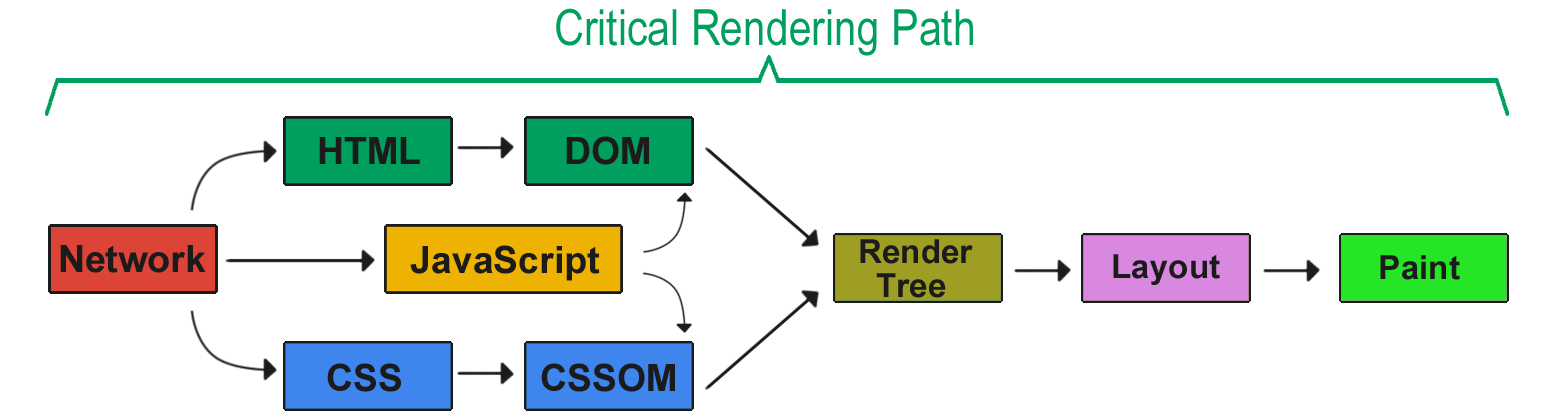
<style>
.page{position:relative;width:1552px;height:417px;background:#ffffff}
.page>*{position:absolute;margin:0}
.t1{font:50px "ArialNarrow";color:#009f5d}
.t2{font:37.5px "Arial-BoldMT";color:#1b1b1b}
.t3{font:33.3px/33.3px "Arial-BoldMT";color:#1b1b1b}
.t4{font:33.3px "Arial-BoldMT";color:#1b1b1b}
</style>
<div class="page">
<p class="t1" style="left:556px;top:8px;width:417px;height:48px">Critical Rendering Path</p>
<p class="t2" style="left:319px;top:137px;width:101px;height:27px">HTML</p>
<p class="t2" style="left:566px;top:136px;width:83px;height:29px">DOM</p>
<p class="t2" style="left:60px;top:245px;width:146px;height:28px">Network</p>
<p class="t2" style="left:410px;top:245px;width:190px;height:36px">JavaScript</p>
<p class="t3" style="left:860px;top:239px;width:113px;height:59px">Render<br>  Tree</p>
<p class="t4" style="left:1113px;top:254px;width:107px;height:31px">Layout</p>
<p class="t4" style="left:1380px;top:255px;width:80px;height:25px">Paint</p>
<p class="t2" style="left:327px;top:363px;width:74px;height:29px">CSS</p>
<p class="t2" style="left:541px;top:363px;width:134px;height:29px">CSSOM</p>
</div>
